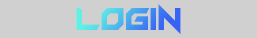
<style>
.page{position:relative;width:257px;height:38px;background:#d0d0d0}
.page>*{position:absolute;margin:0}
.t1{font:28px "VerminVibesV"}
</style>
<div class="page">
<p class="t1" style="left:76px;top:4px;width:105px;height:30px">LOGin</p>
</div>
